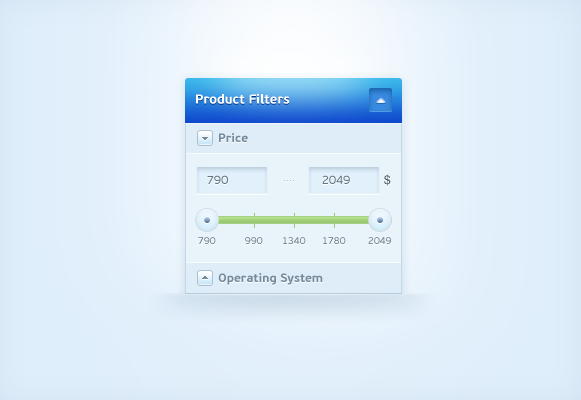
<style>
.page{position:relative;width:581px;height:400px}
.page>*{position:absolute;margin:0}
.t1{font:13px "PFBeauSansPro-Bold";color:#ffffff}
.t2{font:12px "PFBeauSansPro-Bold";color:#758b9c}
.t3{font:12px "Helvetica";color:#3c4851}
.t4{font:12px "PFBeauSansPro-Regular";color:#65737f}
.t5{font:10px "ArialMT";color:#b4c3d0}
.t6{font:10px "PFBeauSansPro-Regular"}
.t7{font:10px "PFBeauSansPro-Regular";color:#65737f}
</style>
<div class="page">
<p class="t1" style="left:196px;top:93px;width:94px;height:11px">Product Filters</p>
<p class="t2" style="left:219px;top:133px;width:29px;height:9px">Price</p>
<p class="t3" style="left:384px;top:174px;width:7px;height:12px">$</p>
<p class="t4" style="left:207px;top:175px;width:21px;height:9px">790</p>
<p class="t5" style="left:284px;top:180px;width:10px;height:1px">....</p>
<p class="t4" style="left:322px;top:175px;width:28px;height:9px">2049</p>
<p class="t6" style="left:198px;top:237px;width:18px;height:7px">790</p>
<p class="t6" style="left:245px;top:237px;width:18px;height:7px">990</p>
<p class="t6" style="left:283px;top:237px;width:23px;height:7px">1340</p>
<p class="t7" style="left:323px;top:237px;width:23px;height:7px">1780</p>
<p class="t6" style="left:368px;top:237px;width:23px;height:7px">2049</p>
<p class="t2" style="left:218px;top:273px;width:105px;height:12px">Operating System</p>
</div>
